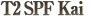
<style>
.page{position:relative;width:91px;height:19px;background:#ffffff}
.page>*{position:absolute;margin:0}
.t1{font:18px "RyuminPro-ExBold";letter-spacing:-0.08em;color:#4a3f32;font-weight:bold;scale:0.9 1}
</style>
<div class="page">
<p class="t1" style="left:0px;top:1px;width:84px;height:15px">T2 SPF Kai</p>
</div>
